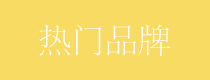
<style>
.page{position:relative;width:210px;height:80px;background:#f8db62}
.page>*{position:absolute;margin:0}
.t1{font:33.3px "FZSYJW--GB1-0";color:#fcfcfc}
</style>
<div class="page">
<p class="t1" style="left:39px;top:24px;width:132px;height:33px">热门品牌</p>
</div>
